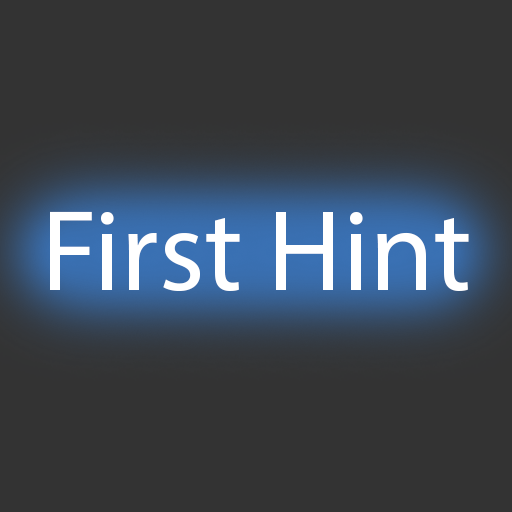
<style>
.page{position:relative;width:512px;height:512px;background:#333333}
.page>*{position:absolute;margin:0}
.t1{font:115px "MyriadPro-Regular";color:#ffffff}
</style>
<div class="page">
<p class="t1" style="left:50px;top:211px;width:419px;height:80px">First Hint</p>
</div>
